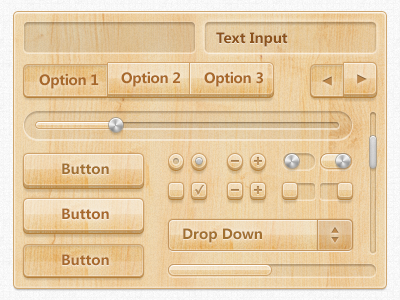
<style>
.page{position:relative;width:400px;height:300px}
.page>*{position:absolute;margin:0}
.t1{font:14px "MicrosoftYaHei-Bold";color:#8b521b}
.t2{font:14px "MicrosoftYaHei-Bold";letter-spacing:-0.02em;color:#a8692b}
.t3{font:14px "MicrosoftYaHei-Bold";color:#a27031}
.t4{font:14px "MicrosoftYaHei-Bold";color:#a8692b}
</style>
<div class="page">
<p class="t1" style="left:216px;top:32px;width:72px;height:15px">Text Input</p>
<p class="t2" style="left:39px;top:73px;width:60px;height:16px">Option 1</p>
<p class="t2" style="left:121px;top:71px;width:59px;height:16px">Option 2</p>
<p class="t2" style="left:204px;top:71px;width:59px;height:16px">Option 3</p>
<p class="t3" style="left:62px;top:163px;width:47px;height:12px">Button</p>
<p class="t4" style="left:62px;top:208px;width:47px;height:12px">Button</p>
<p class="t3" style="left:183px;top:228px;width:79px;height:15px">Drop Down</p>
<p class="t4" style="left:62px;top:254px;width:47px;height:12px">Button</p>
</div>
